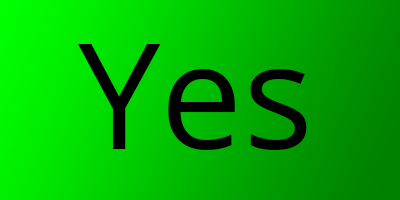
<style>
.page{position:relative;width:400px;height:200px}
.page>*{position:absolute;margin:0}
.t1{font:147.4px "OpenSans";color:#000000}
</style>
<div class="page">
<p class="t1" style="left:78px;top:44px;width:229px;height:106px">Yes</p>
</div>
